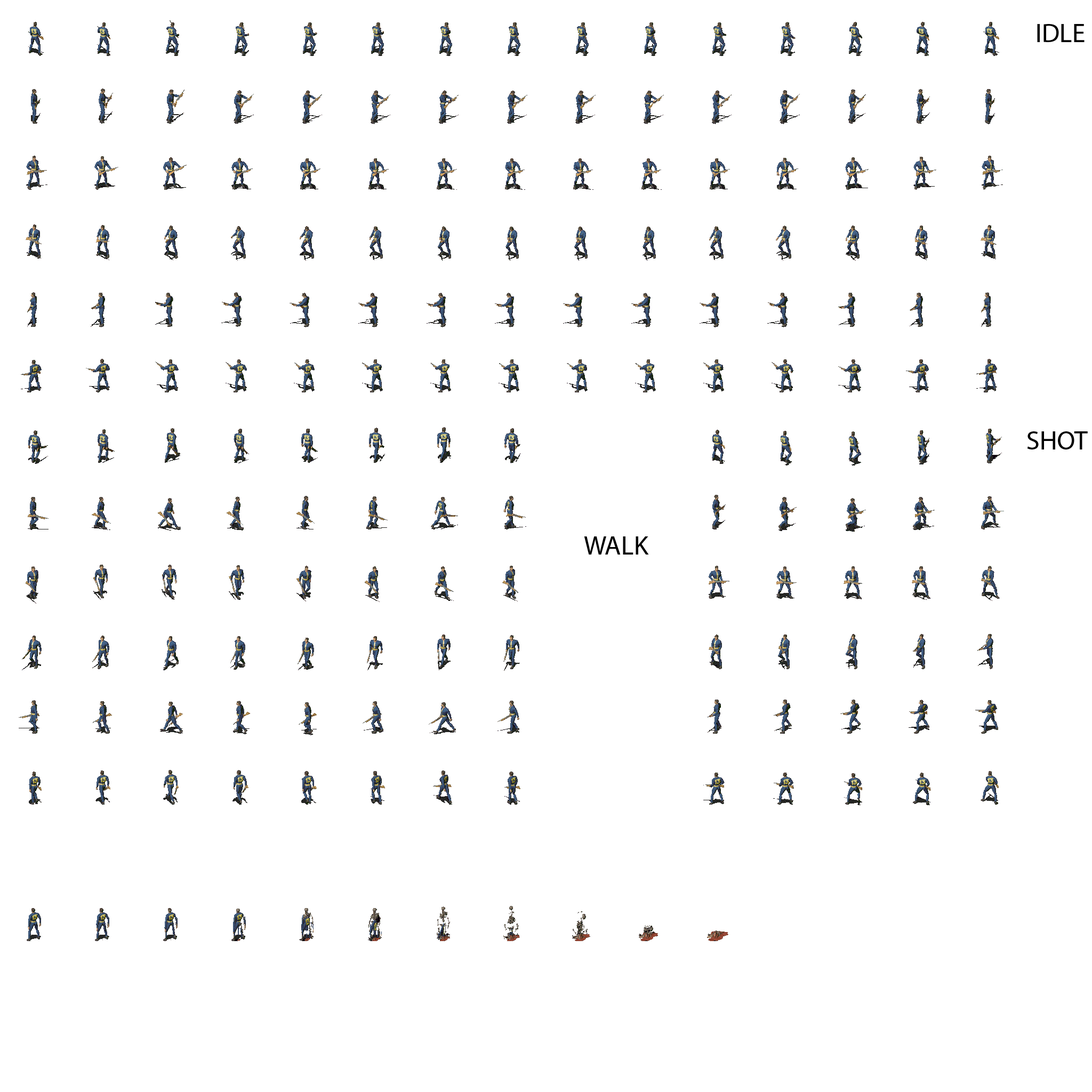
<style>
.page{position:relative;width:1092px;height:1092px;background:#ffffff}
.page>*{position:absolute;margin:0}
.t1{font:26.7px "MyriadPro-Regular";color:#000000}
</style>
<div class="page">
<p class="t1" style="left:1037px;top:24px;width:48px;height:18px">IDLE</p>
<p class="t1" style="left:1027px;top:431px;width:61px;height:18px">SHOT</p>
<p class="t1" style="left:584px;top:536px;width:65px;height:19px">WALK</p>
</div>
